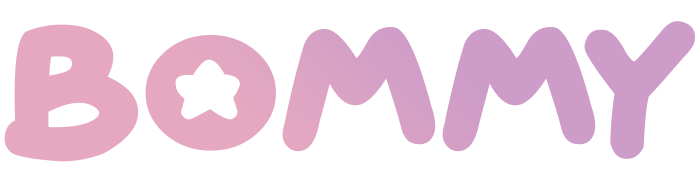
<style>
.page{position:relative;width:699px;height:176px;background:#ffffff}
.page>*{position:absolute;margin:0}
.t1{font:150px "Starborn";color:#daa3c4}
</style>
<div class="page">
<p class="t1" style="left:4px;top:21px;width:691px;height:141px">bommy</p>
</div>
